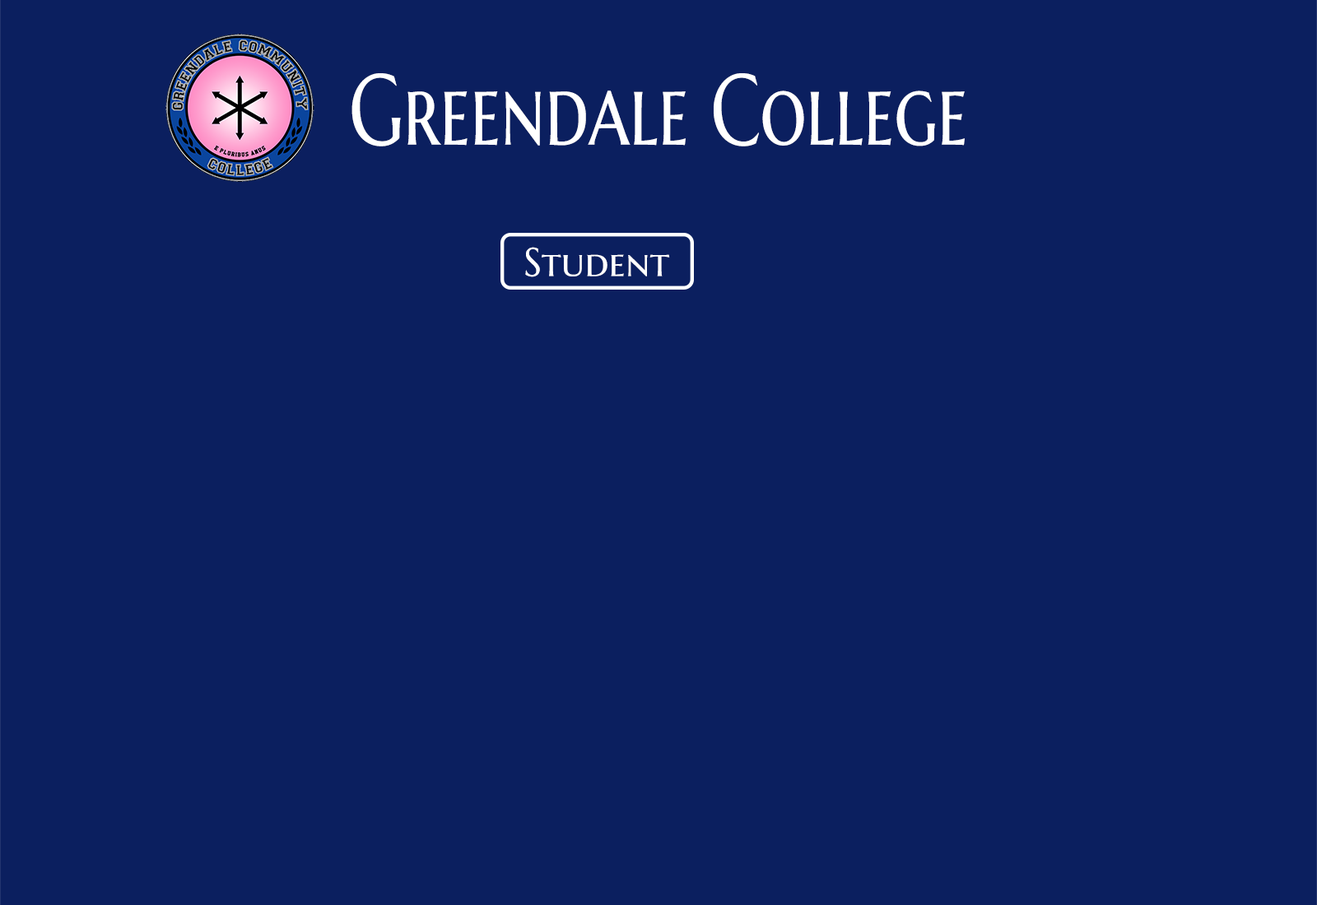
<style>
.page{position:relative;width:1317px;height:905px;background:#0b1f5f}
.page>*{position:absolute;margin:0}
.t1{font:100.3px "MarcellusSC-Regular";color:#ffffff;scale:0.73 1}
.t2{font:40.2px "MarcellusSC-Regular";color:#ffffff}
</style>
<div class="page">
<p class="t1" style="left:351px;top:73px;width:614px;height:74px">Greendale College</p>
<p class="t2" style="left:525px;top:247px;width:145px;height:30px">Student</p>
</div>
